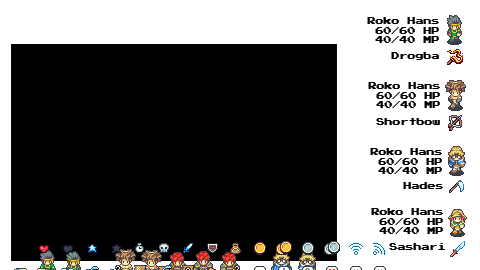
<style>
.page{position:relative;width:480px;height:270px;background:#000000}
.page>*{position:absolute;margin:0}
.t1{font:8px "PressStart2P-Regular";color:#000000}
</style>
<div class="page">
<p class="t1" style="left:367px;top:17px;width:72px;height:26px;text-align:right">Roko Hans<br>60/60 HP<br>40/40 MP</p>
<p class="t1" style="left:391px;top:52px;width:48px;height:8px">Drogba</p>
<p class="t1" style="left:368px;top:82px;width:72px;height:26px;text-align:right">Roko Hans<br>60/60 HP<br>40/40 MP</p>
<p class="t1" style="left:376px;top:118px;width:64px;height:7px">Shortbow</p>
<p class="t1" style="left:370px;top:148px;width:72px;height:26px;text-align:right">Roko Hans<br>60/60 HP<br>40/40 MP</p>
<p class="t1" style="left:403px;top:182px;width:40px;height:7px">Hades</p>
<p class="t1" style="left:371px;top:208px;width:72px;height:26px;text-align:right">Roko Hans<br>60/60 HP<br>40/40 MP</p>
<p class="t1" style="left:389px;top:243px;width:56px;height:7px">Sashari</p>
</div>
